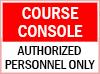
<style>
.page{position:relative;width:100px;height:74px;background:#fe0000}
.page>*{position:absolute;margin:0}
.t1{font:18px/18px "FranklinGothic-MediumCond";color:#ffffff}
.t2{font:13.5px/14px "FranklinGothic-MediumCond";color:#000000}
</style>
<div class="page">
<p class="t1" style="left:18px;top:7px;width:65px;height:30px;text-align:center">COURSE<br>CONSOLE</p>
<p class="t2" style="left:5px;top:46px;width:90px;height:23px;text-align:center">AUTHORIZED<br>PERSONNEL ONLY</p>
</div>
